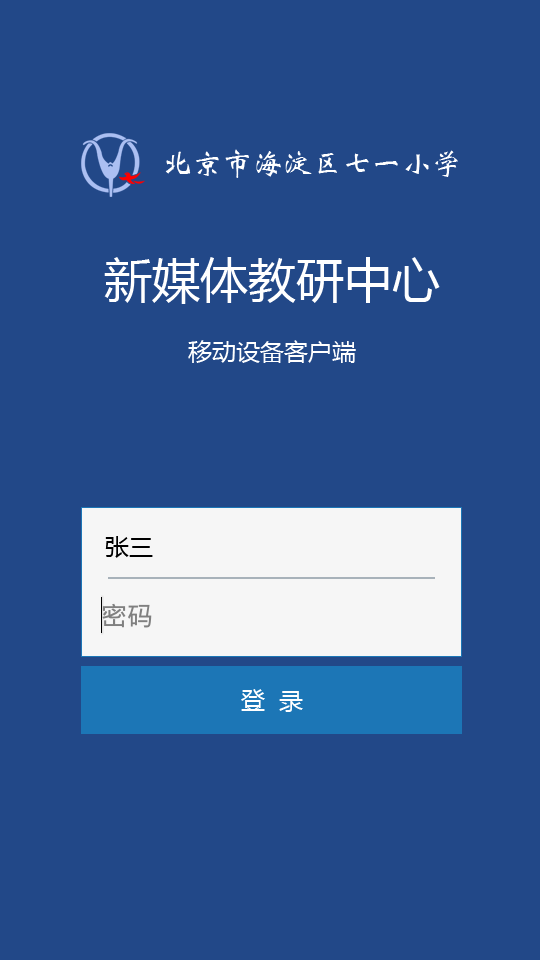
<style>
.page{position:relative;width:540px;height:960px;background:#224888}
.page>*{position:absolute;margin:0}
.t1{font:30px "STXinwei";color:#ffffff}
.t2{font:48px "MicrosoftYaHei";color:#ffffff}
.t3{font:24px "MicrosoftYaHei";color:#ffffff}
.t4{font:24px "MicrosoftYaHei";color:#000000}
</style>
<div class="page">
<p class="t1" style="left:165px;top:149px;width:293px;height:29px">北京市海淀区七一小学</p>
<p class="t2" style="left:104px;top:257px;width:336px;height:106px;text-align:center">新媒体教研中心<br><span class="t3">移动设备客户端</span></p>
<p class="t4" style="left:105px;top:536px;width:48px;height:22px">张三</p>
<p class="t3" style="left:241px;top:689px;width:62px;height:23px">登  录</p>
</div>
